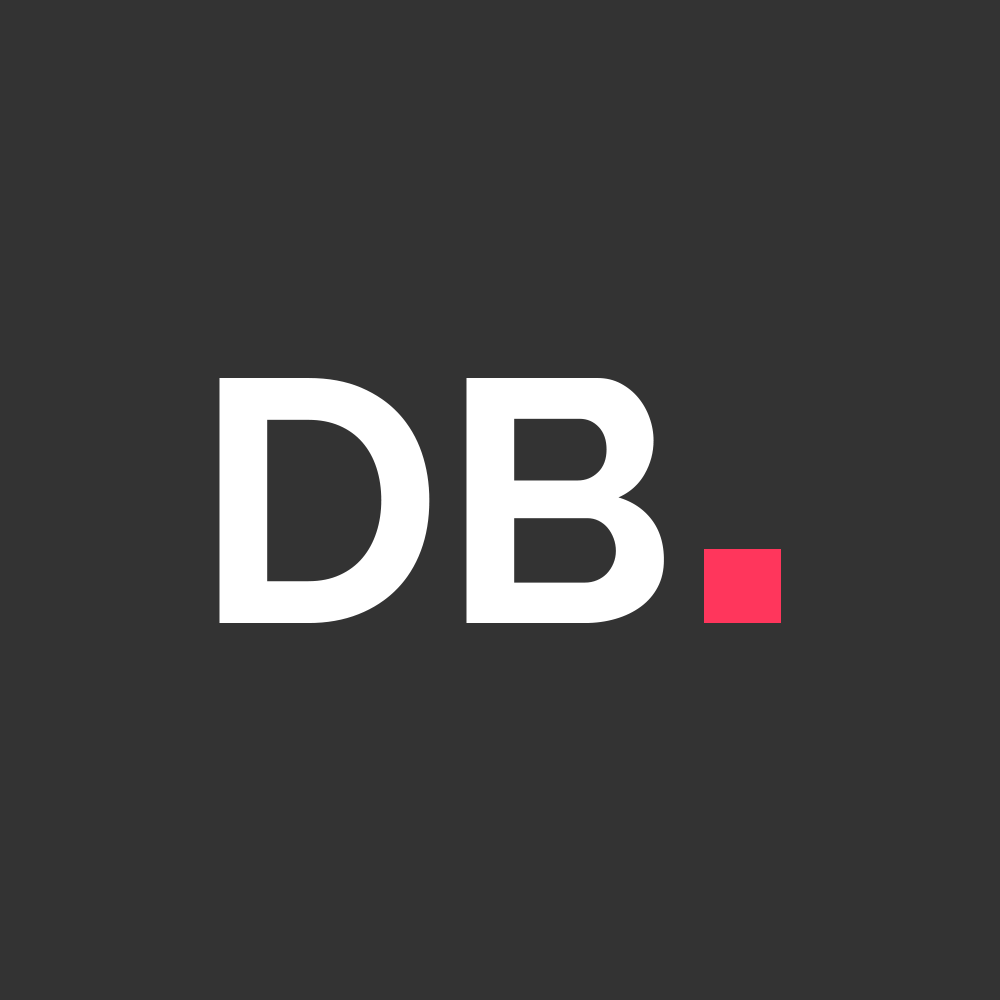
<style>
.page{position:relative;width:1000px;height:1000px;background:#333333}
.page>*{position:absolute;margin:0}
.t1{font:345.4px "Raleway-Bold";color:#ffffff}
</style>
<div class="page">
<p class="t1" style="left:219px;top:378px;width:445px;height:245px">DB</p>
</div>
